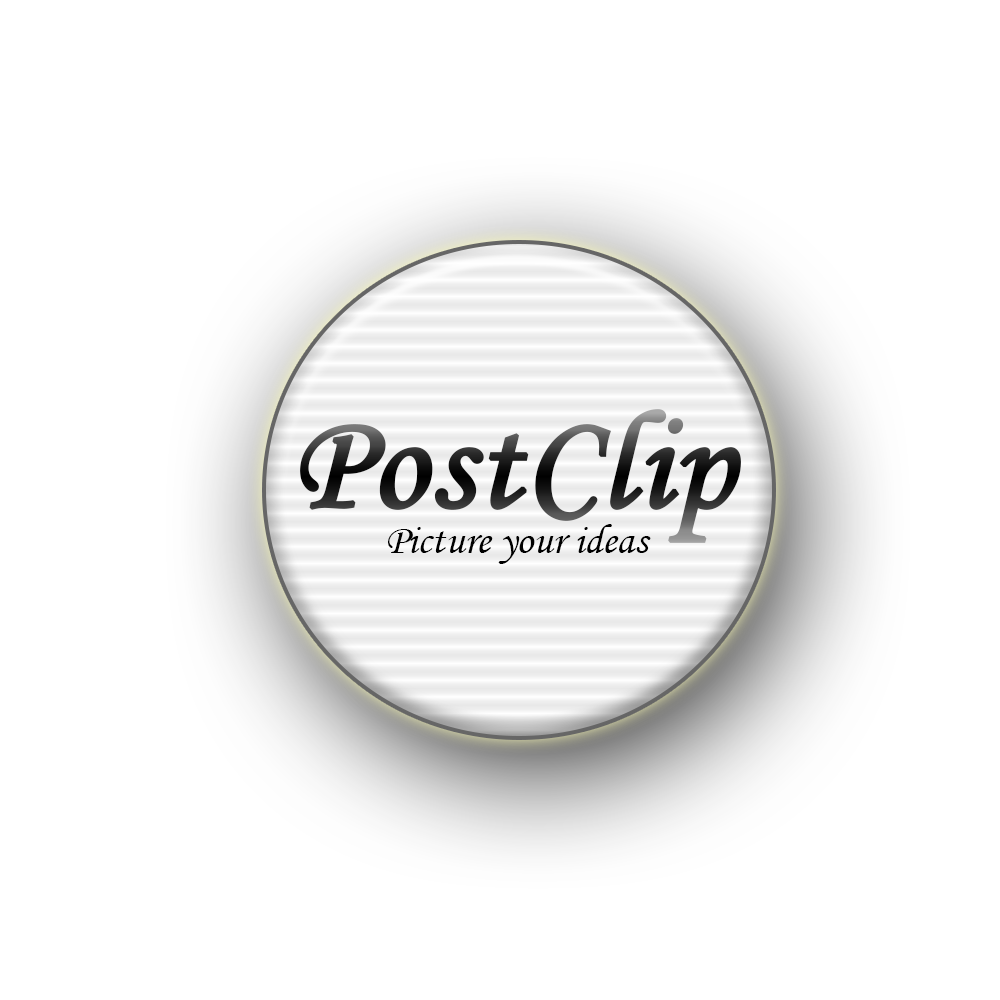
<style>
.page{position:relative;width:1000px;height:1000px;background:#ffffff}
.page>*{position:absolute;margin:0}
.t1{font:137.5px "MonotypeCorsiva";font-weight:bold}
.t2{font:41.7px "MonotypeCorsiva";color:#000000}
</style>
<div class="page">
<p class="t1" style="left:300px;top:409px;width:441px;height:134px">PostClip</p>
<p class="t2" style="left:388px;top:524px;width:263px;height:40px">Picture your ideas</p>
</div>
